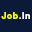
<style>
.page{position:relative;width:32px;height:32px;background:#0b1a39}
.page>*{position:absolute;margin:0}
.t1{font:9px "Antapani-ExtraBold";letter-spacing:0.075em;color:#ffff00}
.t2{font:9px "Antapani-ExtraBold";letter-spacing:0.075em;color:#ffffff}
</style>
<div class="page">
<p class="t1" style="left:1px;top:12px;width:29px;height:7px">Job<span class="t2">.In</span></p>
</div>
